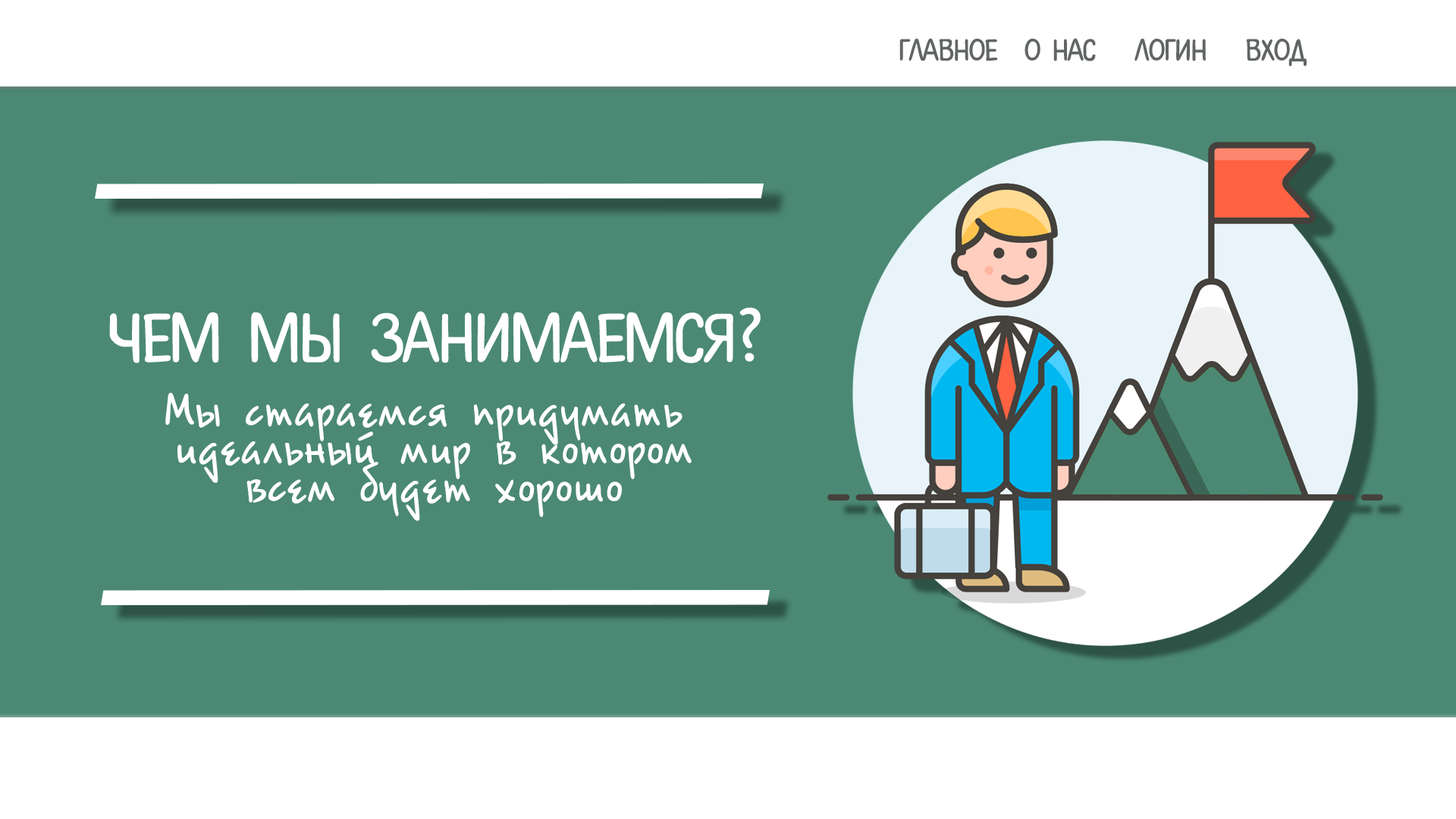
<style>
.page{position:relative;width:1456px;height:819px;background:#4b8974}
.page>*{position:absolute;margin:0}
.t1{font:31.6px "PlainScriptCTT";letter-spacing:-0.005em;color:#616664}
.t2{font:50.6px/37.9px "Epsilon";letter-spacing:-0.005em;color:#ffffff}
</style>
<div class="page">
<p class="t1" style="left:899px;top:38px;width:99px;height:23px">главное</p>
<p class="t1" style="left:1024px;top:38px;width:72px;height:23px">о нас</p>
<p class="t1" style="left:1134px;top:39px;width:72px;height:22px">логин</p>
<p class="t1" style="left:1246px;top:39px;width:61px;height:28px">вход</p>
<p class="t2" style="left:165px;top:393px;width:527px;height:128px;text-align:center">Мы стараемся придумать <br>идеальный мир в котором<br>всем будет хорошо</p>
</div>
